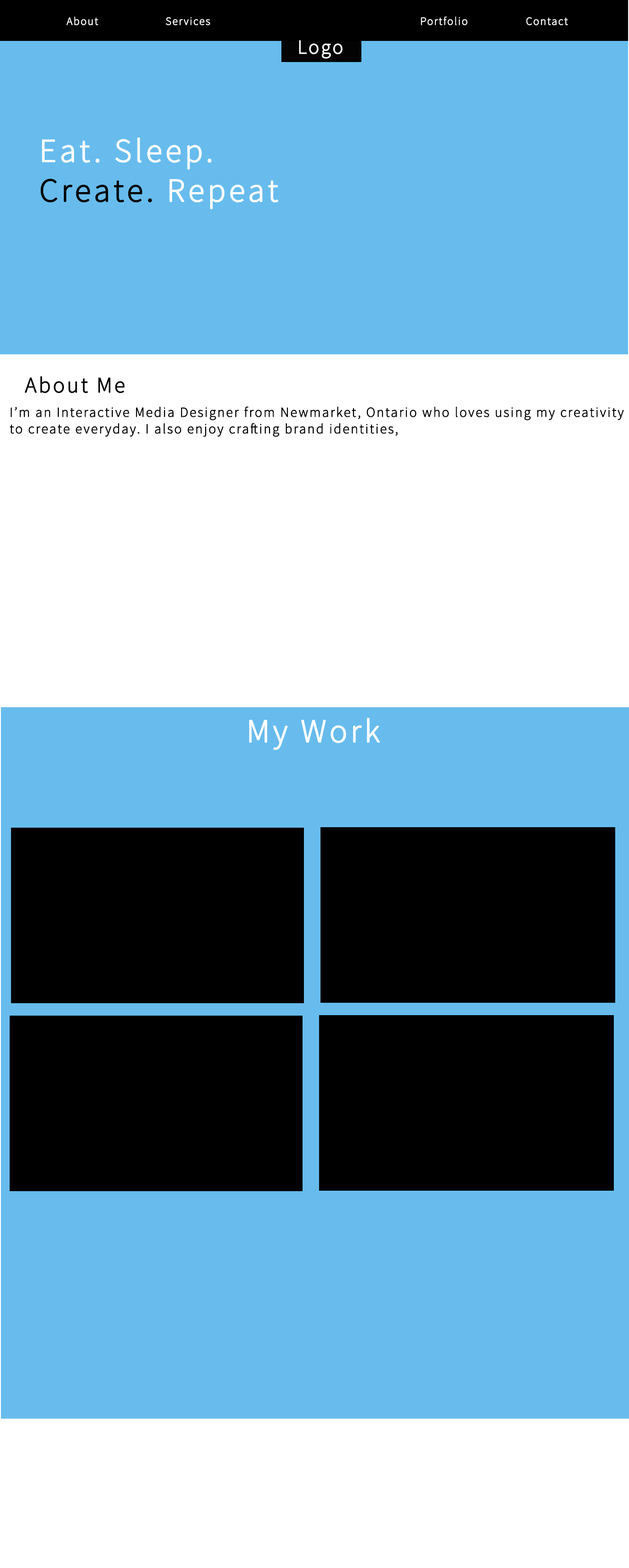
<style>
.page{position:relative;width:629px;height:1568px;background:#67bced}
.page>*{position:absolute;margin:0}
.t1{font:11px "SourceSansPro-Light";letter-spacing:0.075em;color:#ffffff;font-weight:bold}
.t2{font:19.7px "SourceSansPro-Light";letter-spacing:0.075em;color:#ffffff;font-weight:bold}
.t3{font:33.1px "SourceSansPro-Light";letter-spacing:0.075em;color:#ffffff;font-weight:bold}
.t4{font:33.1px "SourceSansPro-Light";letter-spacing:0.075em;color:#000000;font-weight:bold}
.t5{font:22.1px "SourceSansPro-Light";letter-spacing:0.075em;color:#000000;font-weight:bold}
.t6{font:13.8px "SourceSansPro-Light";letter-spacing:0.075em;color:#000000;font-weight:bold}
</style>
<div class="page">
<p class="t1" style="left:66px;top:17px;width:32px;height:8px">About</p>
<p class="t1" style="left:165px;top:17px;width:45px;height:8px">Services</p>
<p class="t1" style="left:420px;top:17px;width:47px;height:8px">Portfolio</p>
<p class="t1" style="left:526px;top:17px;width:42px;height:8px">Contact</p>
<p class="t2" style="left:299px;top:40px;width:43px;height:19px">Logo</p>
<p class="t3" style="left:40px;top:137px;width:238px;height:72px">Eat. Sleep. <br><span class="t4">Create.</span> Repeat</p>
<p class="t5" style="left:24px;top:376px;width:101px;height:17px">About Me</p>
<p class="t6" style="left:10px;top:406px;width:614px;height:31px">I’m an Interactive Media Designer from Newmarket, Ontario who loves using my creativity to create everyday. I also enjoy crafting brand identities,</p>
<p class="t3" style="left:249px;top:718px;width:131px;height:32px">My Work</p>
</div>
